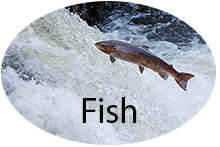
<style>
.page{position:relative;width:220px;height:147px;background:#ffffff}
.page>*{position:absolute;margin:0}
.t1{font:36px "MyriadPro-Regular";color:#000000}
</style>
<div class="page">
<p class="t1" style="left:82px;top:97px;width:55px;height:26px">Fish</p>
</div>
